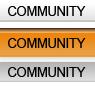
<style>
.page{position:relative;width:95px;height:88px}
.page>*{position:absolute;margin:0}
.t1{font:12.7px "ArialMT";color:#000000}
</style>
<div class="page">
<p class="t1" style="left:8px;top:6px;width:78px;height:10px">COMMUNITY</p>
<p class="t1" style="left:8px;top:38px;width:78px;height:10px">COMMUNITY</p>
<p class="t1" style="left:8px;top:67px;width:78px;height:10px">COMMUNITY</p>
</div>
